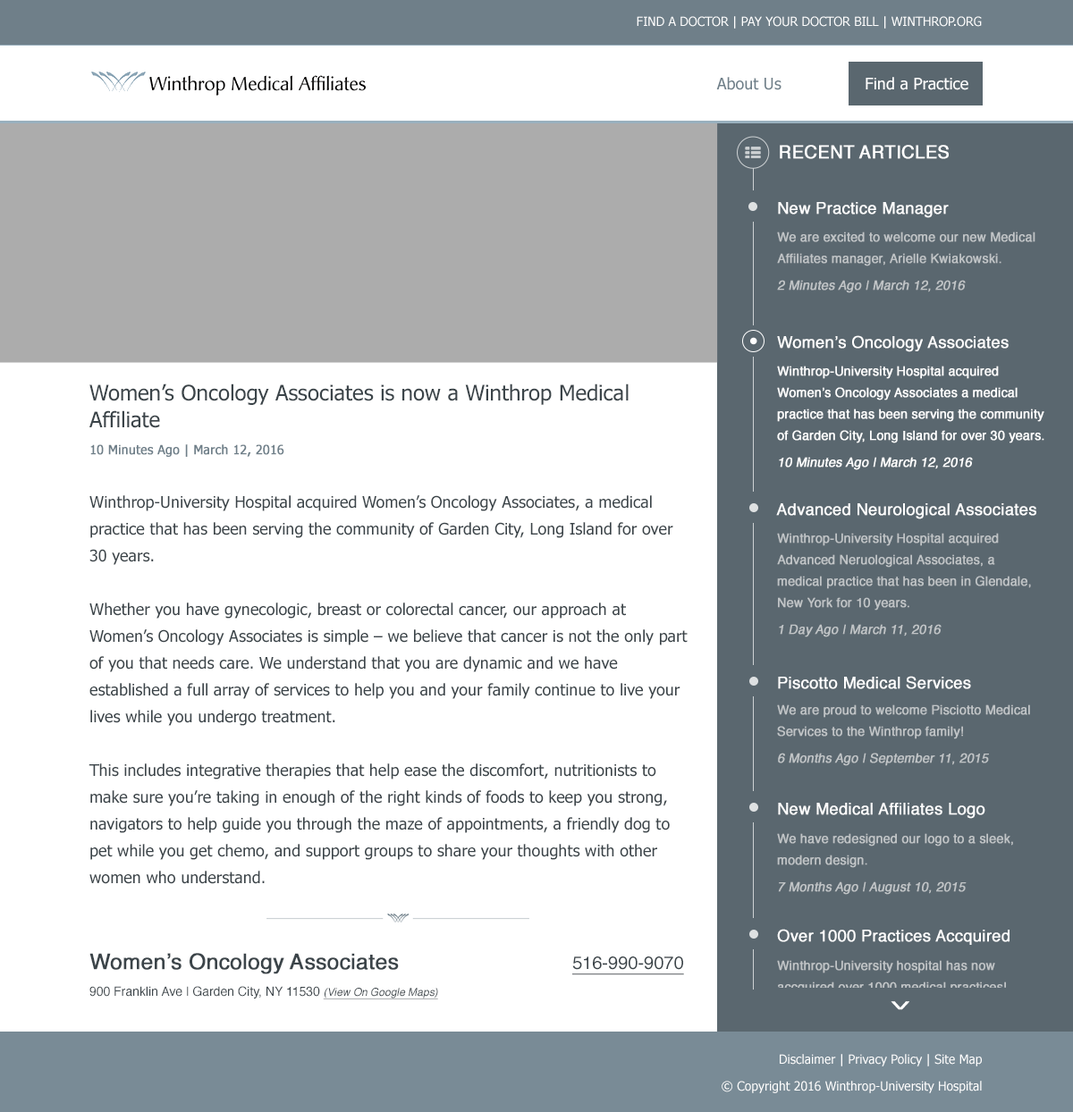
<style>
.page{position:relative;width:1073px;height:1112px;background:#ffffff}
.page>*{position:absolute;margin:0}
.t1{font:12.5px "Tahoma";color:#ffffff;text-transform:uppercase}
.t2{font:17.9px "Helvetica";color:#ffffff;text-transform:uppercase;font-weight:bold}
.t3{font:16.1px "Helvetica";color:#ffffff;font-weight:bold}
.t4{font:12.5px/21.5px "Helvetica";color:#c0c4c6;font-weight:bold}
.t5{font:12.5px/26.8px "Helvetica";color:#c0c4c6;font-weight:bold;font-style:italic}
.t6{font:12.5px/21.5px "Helvetica";color:#ffffff;font-weight:bold}
.t7{font:12.5px/26.8px "Helvetica";color:#ffffff;font-weight:bold;font-style:italic}
.t8{font:16.1px/26.8px "Tahoma";color:#3b4449}
.t9{font:21.5px/26.8px "Tahoma";color:#3b4449}
.t10{font:12.5px/26.8px "Tahoma";color:#6f7f89;font-weight:bold}
.t11{font:21.5px/26.8px "Helvetica";color:#3b4449;font-weight:bold}
.t12{font:17.9px/26.8px "Helvetica";color:#3b4449;text-decoration:underline}
.t13{font:12.5px/26.8px "Helvetica";color:#3b4449}
.t14{font:10.7px/26.8px "Helvetica";color:#3b4449;font-style:italic;text-decoration:underline}
.t15{font:10.7px "Helvetica";letter-spacing:1.2em;color:#ffffff;font-weight:bold;scale:2.58 1}
.t16{font:12.5px/26.8px "Tahoma";color:#ffffff}
</style>
<div class="page">
<p class="t1" style="left:636px;top:16px;width:345px;height:13px">Find a doctor | Pay Your Doctor Bill | winthrop.org</p>
<p class="t2" style="left:779px;top:145px;width:169px;height:14px">recent Articles</p>
<p class="t3" style="left:778px;top:202px;width:170px;height:16px">New Practice Manager</p>
<p class="t4" style="left:777px;top:231px;width:258px;height:62px">We are excited to welcome our new Medical Affiliates manager, Arielle Kwiakowski.<br><span class="t5">2 Minutes Ago | March 12, 2016</span></p>
<p class="t3" style="left:777px;top:335px;width:231px;height:17px">Women’s Oncology Associates</p>
<p class="t6" style="left:777px;top:366px;width:267px;height:104px">Winthrop-University Hospital acquired <br>Women’s Oncology Associates a medical practice that has been serving the community of Garden City, Long Island for over 30 years. <br><span class="t7">10 Minutes Ago | March 12, 2016</span></p>
<p class="t8" style="left:88px;top:383px;width:599px;height:616px"><span class="t9">Women’s Oncology Associates is now a Winthrop Medical <br>Affiliate<br></span><span class="t10">10 Minutes Ago | March 12, 2016<br><br></span>Winthrop-University Hospital acquired Women’s Oncology Associates, a medical <br>practice that has been serving the community of Garden City, Long Island for over 30 years. <br><br>Whether you have gynecologic, breast or colorectal cancer, our approach at <br>Women’s Oncology Associates is simple – we believe that cancer is not the only part of you that needs care. We understand that you are dynamic and we have <br>established a full array of services to help you and your family continue to live your lives while you undergo treatment. <br><br>This includes integrative therapies that help ease the discomfort, nutritionists to make sure you’re taking in enough of the right kinds of foods to keep you strong, navigators to help guide you through the maze of appointments, a friendly dog to pet while you get chemo, and support groups to share your thoughts with other women who understand. <br><br><br><span class="t11">Women’s Oncology Associates      </span><span class="t12">516-990-9070<br></span><span class="t13">900 Franklin Ave | Garden City, NY 11530 </span><span class="t14">(View On Google Maps)</span></p>
<p class="t3" style="left:776px;top:503px;width:260px;height:16px">Advanced Neurological Associates</p>
<p class="t4" style="left:777px;top:533px;width:253px;height:104px">Winthrop-University Hospital acquired <br>Advanced Neruological Associates, a <br>medical practice that has been in Glendale, New York for 10 years.<br><span class="t5">1 Day Ago | March 11, 2016</span></p>
<p class="t3" style="left:778px;top:676px;width:193px;height:13px">Piscotto Medical Services</p>
<p class="t4" style="left:777px;top:704px;width:253px;height:62px">We are proud to welcome Pisciotto Medical Services to the Winthrop family!<br><span class="t5">6 Months Ago | September 11, 2015</span></p>
<p class="t3" style="left:778px;top:803px;width:207px;height:16px">New Medical Affiliates Logo</p>
<p class="t4" style="left:777px;top:833px;width:236px;height:62px">We have redesigned our logo to a sleek, modern design.<br><span class="t5">7 Months Ago | August 10, 2015</span></p>
<p class="t3" style="left:777px;top:929px;width:232px;height:16px">Over 1000 Practices Accquired</p>
<p class="t4" style="left:777px;top:960px;width:228px;height:35px">Winthrop-University hospital has now accquired over 1000 medical practices!</p>
<p class="t15" style="left:890px;top:1001px;width:19px;height:9px">V</p>
<p class="t16" style="left:721px;top:1054px;width:260px;height:39px;text-align:right">Disclaimer | Privacy Policy | Site Map<br>© Copyright 2016 Winthrop-University Hospital</p>
</div>
